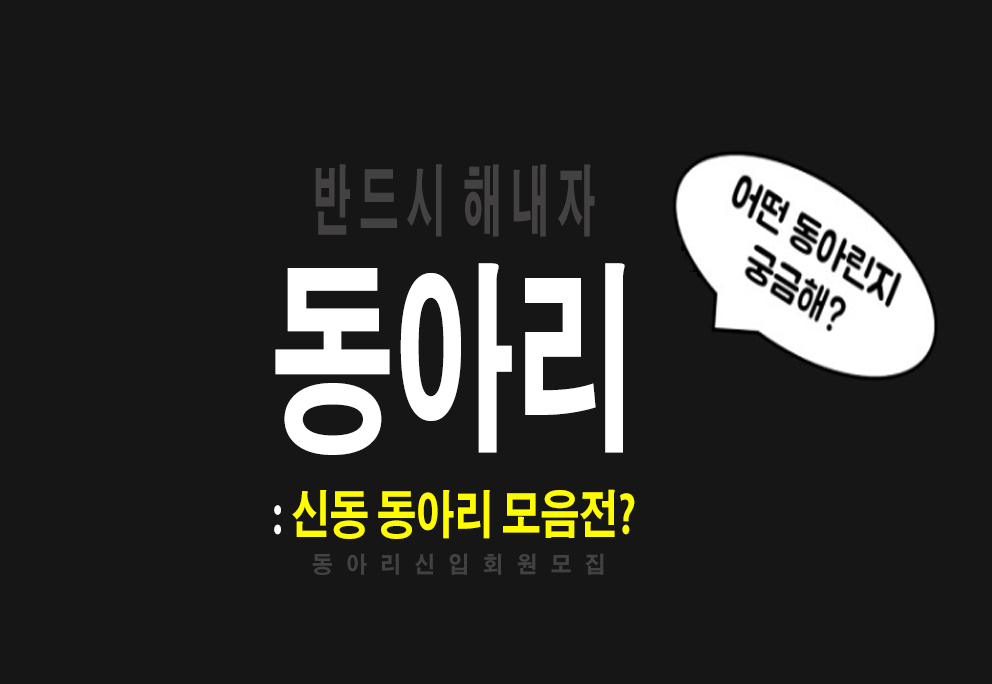
<style>
.page{position:relative;width:992px;height:684px;background:#161616}
.page>*{position:absolute;margin:0}
.t1{font:77px "AdobeGothicStd-Bold";color:#434141;text-transform:uppercase;scale:0.5 1}
.t2{font:201.8px "AdobeGothicStd-Bold";color:#ffffff;text-transform:uppercase;scale:0.6 1}
.t3{font:51.7px "AdobeGothicStd-Bold";color:#fffc00;text-transform:uppercase;scale:0.75 1}
.t4{font:51.7px "AdobeGothicStd-Bold";color:#ffffff;text-transform:uppercase;scale:0.75 1}
.t5{font:22.6px "AdobeGothicStd-Bold";color:#434141;text-transform:uppercase;scale:0.92 1}
</style>
<div class="page">
<p class="t1" style="left:315px;top:164px;width:280px;height:73px">반 드 시  해 내 자</p>
<p class="t2" style="left:275px;top:263px;width:350px;height:192px">동아리</p>
<p class="t3" style="left:274px;top:489px;width:361px;height:50px"><span class="t4">: </span>신동 동아리 모음전?</p>
<p class="t5" style="left:312px;top:553px;width:292px;height:22px">동   아   리   신   입   회   원   모   집</p>
</div>
